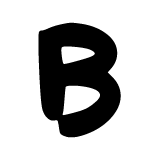
<style>
.page{position:relative;width:160px;height:160px;background:#ffffff}
.page>*{position:absolute;margin:0}
.t1{font:159.4px "QAReports";color:#000000}
</style>
<div class="page">
<p class="t1" style="left:38px;top:22px;width:83px;height:116px">B</p>
</div>
